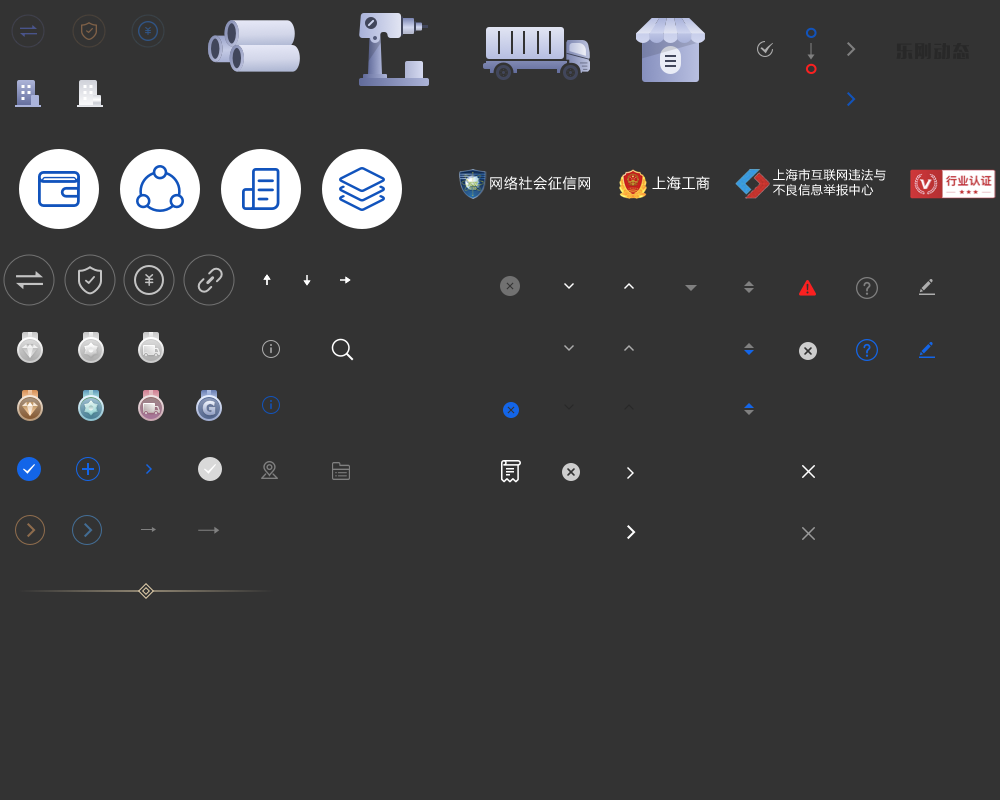
<style>
.page{position:relative;width:1000px;height:800px;background:#333333}
.page>*{position:absolute;margin:0}
.t1{font:12px/15px "MicrosoftYaHei";letter-spacing:0.05em;color:#ffffff}
.t2{font:14px "MicrosoftYaHei";letter-spacing:0.05em;color:#ffffff}
</style>
<div class="page">
<p class="t1" style="left:773px;top:168px;width:113px;height:28px">上海市互联网违法与<br>不良信息举报中心</p>
<p class="t2" style="left:490px;top:176px;width:100px;height:14px">网络社会征信网</p>
<p class="t2" style="left:652px;top:176px;width:58px;height:14px">上海工商</p>
</div>
